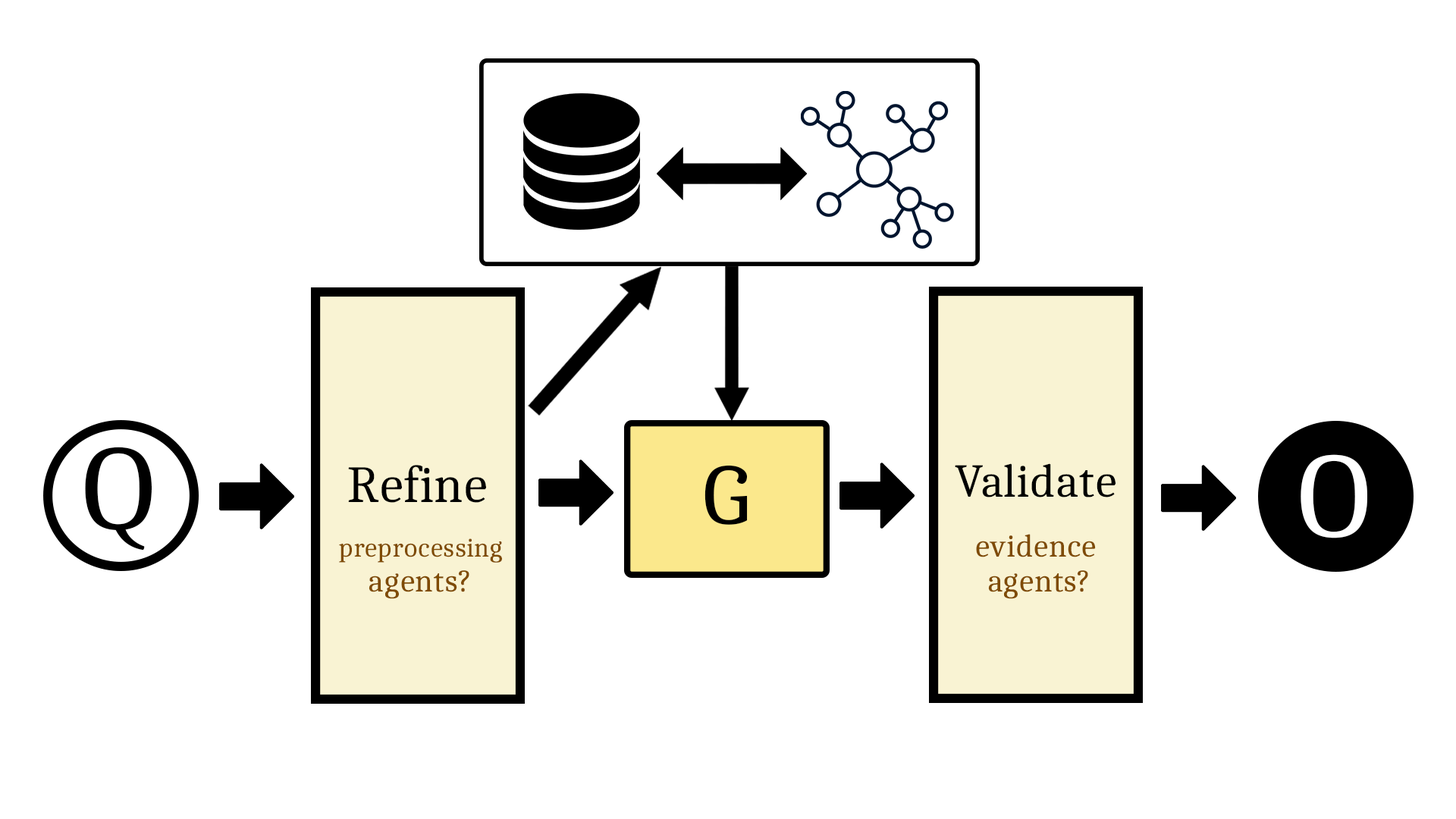
<style>
.page{position:relative;width:1456px;height:819px;background:#ffffff}
.page>*{position:absolute;margin:0}
.t1{font:121.3px "Caladea-Regular";color:#000000}
.t2{font:121.3px "Caladea-Regular";color:#ffffff}
.t3{font:52.1px "Caladea-Regular";color:#000000}
.t4{font:86.6px "Caladea-Regular";color:#000000}
.t5{font:47.2px "Caladea-Regular";color:#000000}
.t6{font:32.2px "Caladea-Regular";color:#7f4b00}
.t7{font:27.2px "Caladea-Regular";color:#7f4b00}
</style>
<div class="page">
<p class="t1" style="left:85px;top:447px;width:67px;height:104px">Q</p>
<p class="t2" style="left:1301px;top:454px;width:66px;height:84px">O</p>
<p class="t3" style="left:348px;top:465px;width:138px;height:38px">Refine</p>
<p class="t4" style="left:704px;top:465px;width:44px;height:60px">G</p>
<p class="t5" style="left:955px;top:463px;width:160px;height:34px">Validate</p>
<p class="t6" style="left:976px;top:534px;width:120px;height:23px">evidence</p>
<p class="t7" style="left:339px;top:538px;width:163px;height:25px">preprocessing</p>
<p class="t6" style="left:369px;top:570px;width:100px;height:29px">agents?</p>
<p class="t6" style="left:988px;top:570px;width:100px;height:29px">agents?</p>
</div>
